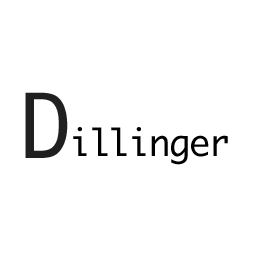
<style>
.page{position:relative;width:256px;height:256px;background:#ffffff}
.page>*{position:absolute;margin:0}
.t1{font:86px "Monaco";color:#202020}
.t2{font:36px "Monaco";letter-spacing:-0.05em;color:#000000}
</style>
<div class="page">
<p class="t1" style="left:25px;top:92px;width:43px;height:66px">D</p>
<p class="t2" style="left:73px;top:127px;width:155px;height:38px">illinger</p>
</div>
